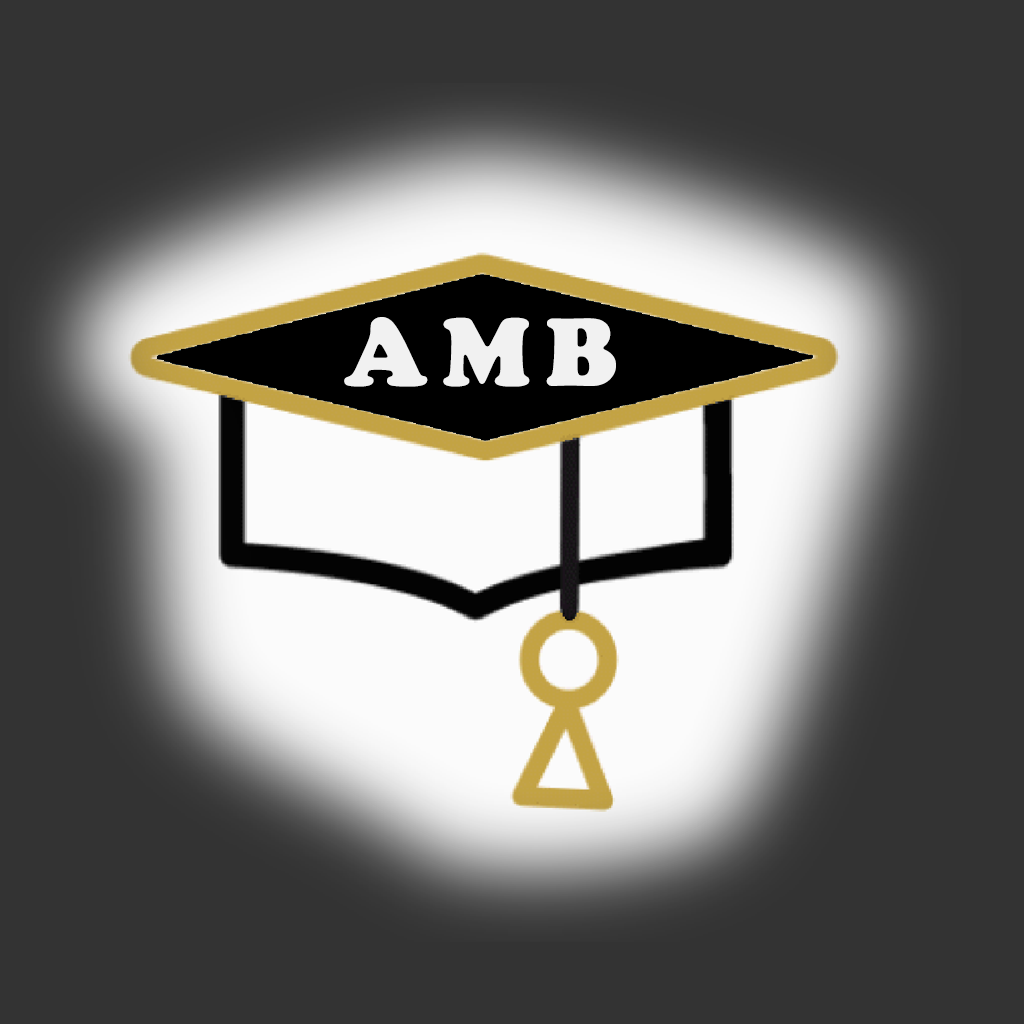
<style>
.page{position:relative;width:1024px;height:1024px;background:#333333}
.page>*{position:absolute;margin:0}
.t1{font:100px "CooperBlack";letter-spacing:-0.05em;color:#f1f1f1}
</style>
<div class="page">
<p class="t1" style="left:344px;top:317px;width:272px;height:70px">A M B</p>
</div>
